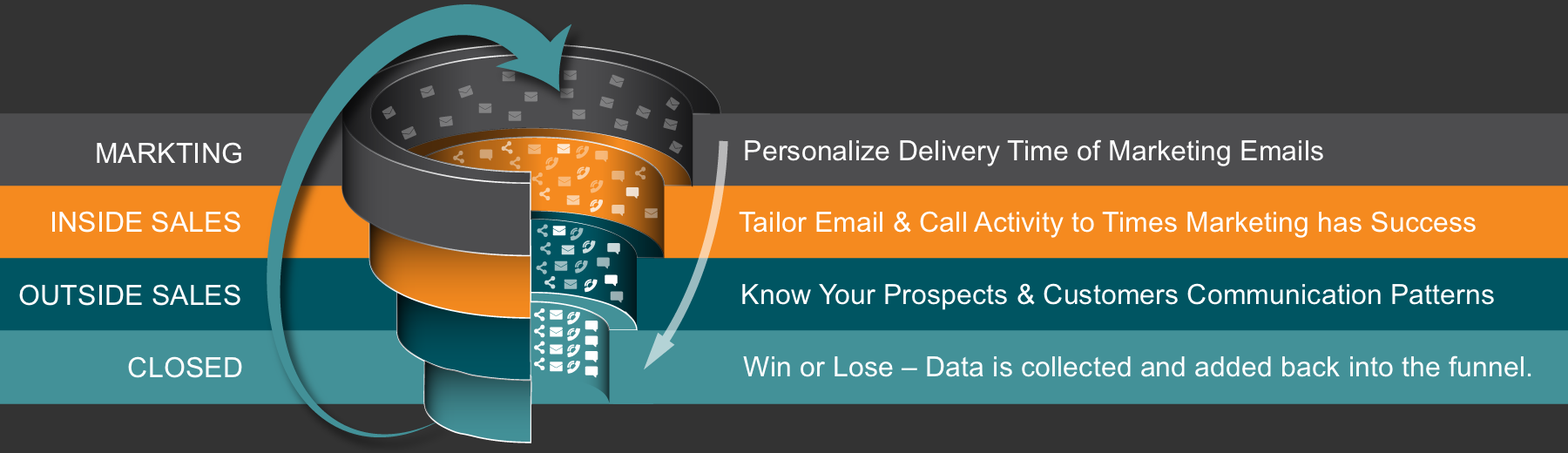
<style>
.page{position:relative;width:1568px;height:453px;background:#333333}
.page>*{position:absolute;margin:0}
.t1{font:27.9px "ArialMT";letter-spacing:0.005em;color:#ffffff}
</style>
<div class="page">
<p class="t1" style="left:97px;top:142px;width:144px;height:22px">MARKTING</p>
<p class="t1" style="left:745px;top:139px;width:578px;height:27px">Personalize Delivery Time of Marketing Emails</p>
<p class="t1" style="left:52px;top:211px;width:188px;height:22px">INSIDE SALES</p>
<p class="t1" style="left:739px;top:211px;width:737px;height:27px">Tailor Email &amp; Call Activity to Times Marketing has Success</p>
<p class="t1" style="left:19px;top:284px;width:221px;height:22px">OUTSIDE SALES</p>
<p class="t1" style="left:742px;top:283px;width:752px;height:27px">Know Your Prospects &amp; Customers Communication Patterns</p>
<p class="t1" style="left:128px;top:356px;width:114px;height:22px">CLOSED</p>
<p class="t1" style="left:743px;top:355px;width:788px;height:22px">Win or Lose – Data is collected and added back into the funnel.</p>
</div>
